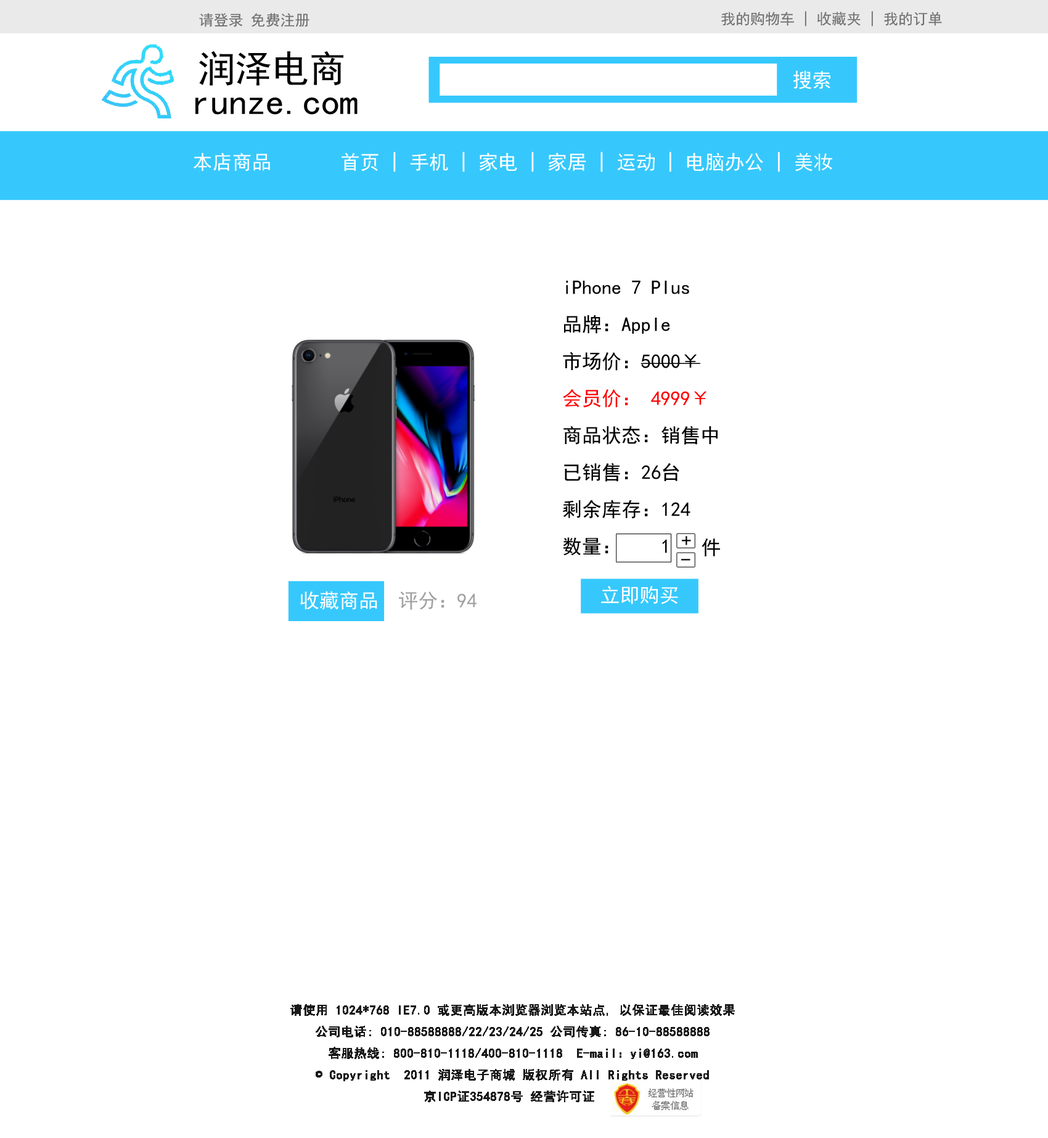
<style>
.page{position:relative;width:1048px;height:1138px;background:#ffffff}
.page>*{position:absolute;margin:0}
.t1{font:14.8px "SimHei";color:#6f6f6f}
.t2{font:37px "SimHei";color:#010101}
.t3{font:19.7px "SimHei";color:#ffffff}
.t4{font:19.7px/18.5px "SimHei";color:#000000}
.t5{font:19.7px/18.5px "SimHei";color:#ff0000}
.t6{font:19.7px "SimHei";color:#000000}
.t7{font:19.7px "SimHei";color:#a2a2a2}
.t8{font:12.3px "SimHei";color:#1a1a1a;font-weight:bold}
.t9{font:12.3px "SimSun";color:#1a1a1a;font-weight:bold}
</style>
<div class="page">
<p class="t1" style="left:199px;top:13px;width:111px;height:14px">请登录 免费注册</p>
<p class="t1" style="left:721px;top:11px;width:221px;height:16px">我的购物车 | 收藏夹 | 我的订单</p>
<p class="t2" style="left:199px;top:51px;width:144px;height:35px">润泽电商</p>
<p class="t3" style="left:793px;top:70px;width:38px;height:19px">搜索</p>
<p class="t2" style="left:195px;top:97px;width:163px;height:18px">runze.com</p>
<p class="t3" style="left:193px;top:152px;width:639px;height:20px">本店商品       首页 | 手机 | 家电 | 家居 | 运动 | 电脑办公 | 美妆</p>
<p class="t4" style="left:563px;top:281px;width:155px;height:275px">iPhone 7 Plus<br><br>品牌：Apple<br><br>市场价：5000￥<br><br><span class="t5">会员价： 4999￥<br><br></span>商品状态：销售中<br><br>已销售：26台<br><br>剩余库存：124<br><br>数量：    1</p>
<p class="t6" style="left:682px;top:536px;width:9px;height:9px">+</p>
<p class="t6" style="left:702px;top:538px;width:18px;height:18px">件</p>
<p class="t6" style="left:681px;top:559px;width:10px;height:1px">-</p>
<p class="t7" style="left:300px;top:591px;width:177px;height:19px"><span class="t3">收藏商品</span>  评分：94</p>
<p class="t3" style="left:601px;top:586px;width:77px;height:18px">立即购买</p>
<p class="t8" style="left:290px;top:1004px;width:445px;height:98px;text-align:center">请使用 1024*768 IE7.0 或更高版本浏览器浏览本站点, 以保证最佳阅读效果<br>公司电话: 010-88588888/22/23/24/25 公司传真: 86-10-88588888<br>客服热线: 800-810-1118/400-810-1118  E-mail：yi@163.com<br><span class="t9">©</span> Copyright  2011 润泽电子商城 版权所有 All Rights Reserved<br>京ICP证354878号 经营许可证</p>
</div>
